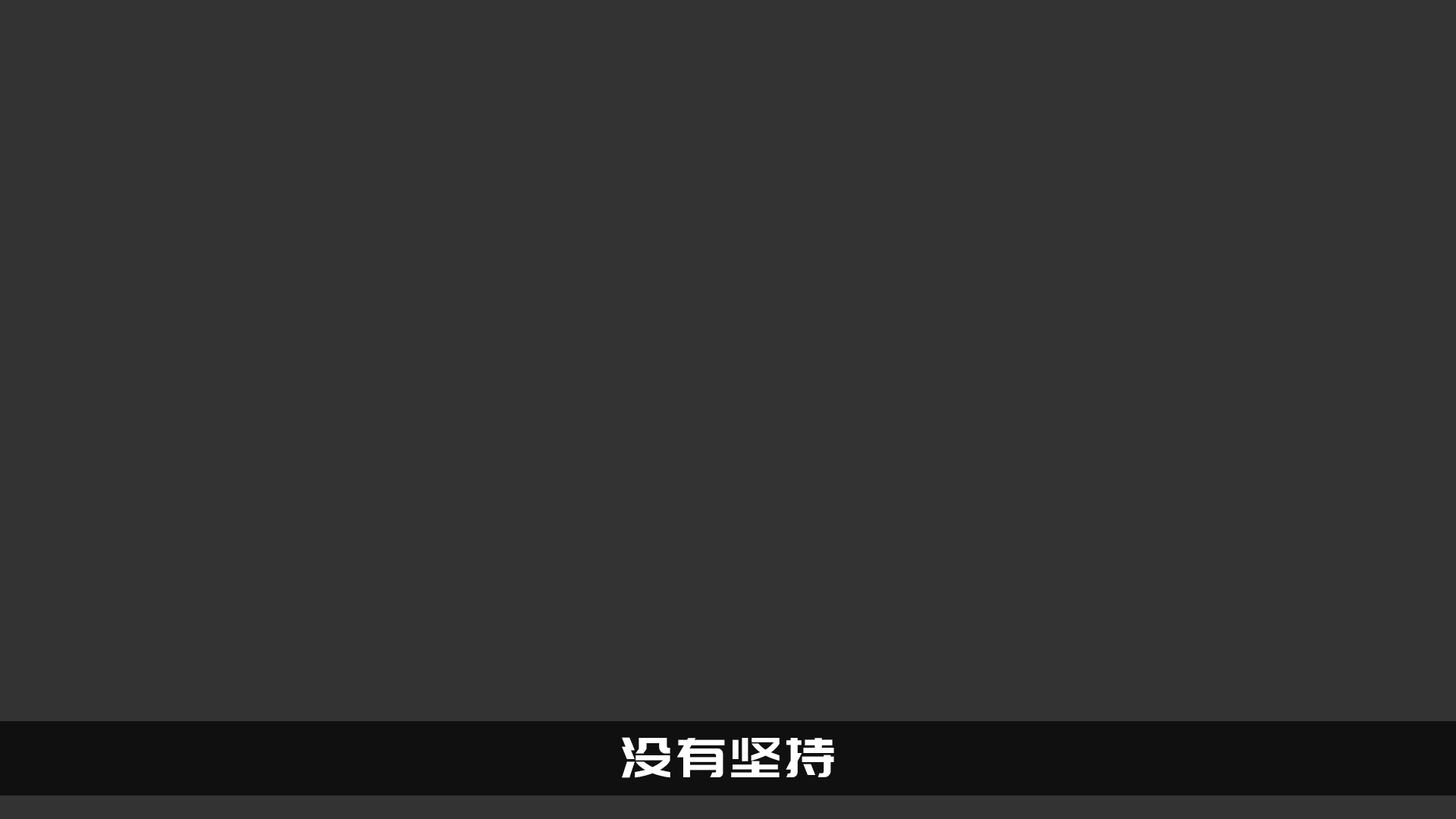
<style>
.page{position:relative;width:1456px;height:819px;background:#333333}
.page>*{position:absolute;margin:0}
.t1{font:54.6px "PangMenZhengDao-3";color:#ffffff}
</style>
<div class="page">
<p class="t1" style="left:622px;top:737px;width:212px;height:41px">没有坚持</p>
</div>
